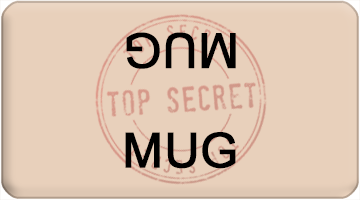
<style>
.page{position:relative;width:360px;height:200px;background:#e8d0bb}
.page>*{position:absolute;margin:0}
.t1{font:48px "ArialMT";color:#000000;font-weight:bold}
</style>
<div class="page">
<p class="t1" style="left:126px;top:32px;width:110px;height:37px;rotate:180deg">MUG</p>
<p class="t1" style="left:125px;top:132px;width:111px;height:37px">MUG</p>
</div>
